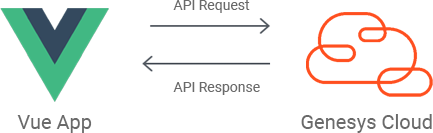
<style>
.page{position:relative;width:433px;height:133px;background:#ffffff}
.page>*{position:absolute;margin:0}
.t1{font:14px "Roboto-Regular";color:#6a6a6a}
.t2{font:20px "Roboto-Regular";color:#6a6a6a}
</style>
<div class="page">
<p class="t1" style="left:173px;top:0px;width:77px;height:13px">API Request</p>
<p class="t1" style="left:173px;top:82px;width:87px;height:13px">API Response</p>
<p class="t2" style="left:17px;top:115px;width:75px;height:18px">Vue App</p>
<p class="t2" style="left:301px;top:114px;width:131px;height:19px">Genesys Cloud</p>
</div>
